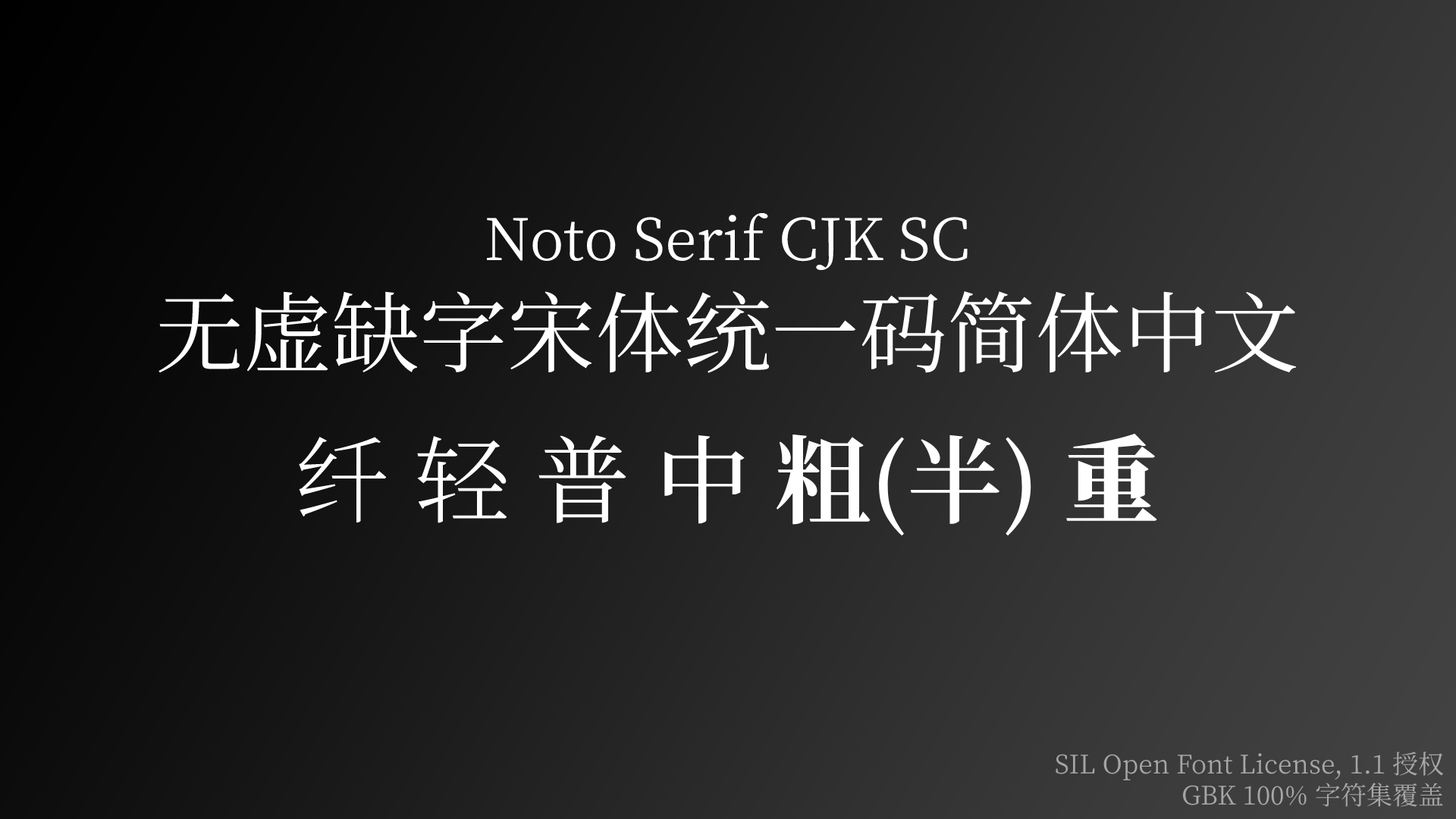
<style>
.page{position:relative;width:1456px;height:819px}
.page>*{position:absolute;margin:0}
.t1{font:57.6px "NotoSerifCJKsc-Regular";color:#ffffff}
.t2{font:88px "NotoSerifCJKsc-Regular";color:#ffffff}
.t3{font:95.5px "NotoSerifCJKsc-SemiBold";color:#ffffff}
.t4{font:95.5px "NotoSerifCJKsc-ExtraLight";color:#ffffff}
.t5{font:95.5px "NotoSerifCJKsc-Light";color:#ffffff}
.t6{font:95.5px "NotoSerifCJKsc-Regular";color:#ffffff}
.t7{font:95.5px "NotoSerifCJKsc-Medium";color:#ffffff}
.t8{font:95.5px "NotoSerifCJKsc-Bold";color:#ffffff}
.t9{font:95.5px "NotoSerifCJKsc-Black";color:#ffffff}
.t10{font:25.8px "NotoSerifCJKsc-Regular";color:#a6a6a6}
</style>
<div class="page">
<p class="t1" style="left:158px;top:212px;width:1139px;height:161px;text-align:center">Noto Serif CJK SC<br><span class="t2">无虚缺字宋体统一码简体中文</span></p>
<p class="t3" style="left:299px;top:433px;width:858px;height:103px"><span class="t4">纤 </span><span class="t5">轻 </span><span class="t6">普 </span><span class="t7">中 </span><span class="t8">粗</span>(半) <span class="t9">重</span></p>
<p class="t10" style="left:1056px;top:751px;width:388px;height:56px;text-align:right">SIL Open Font License, 1.1 授权<br> GBK 100% 字符集覆盖</p>
</div>
